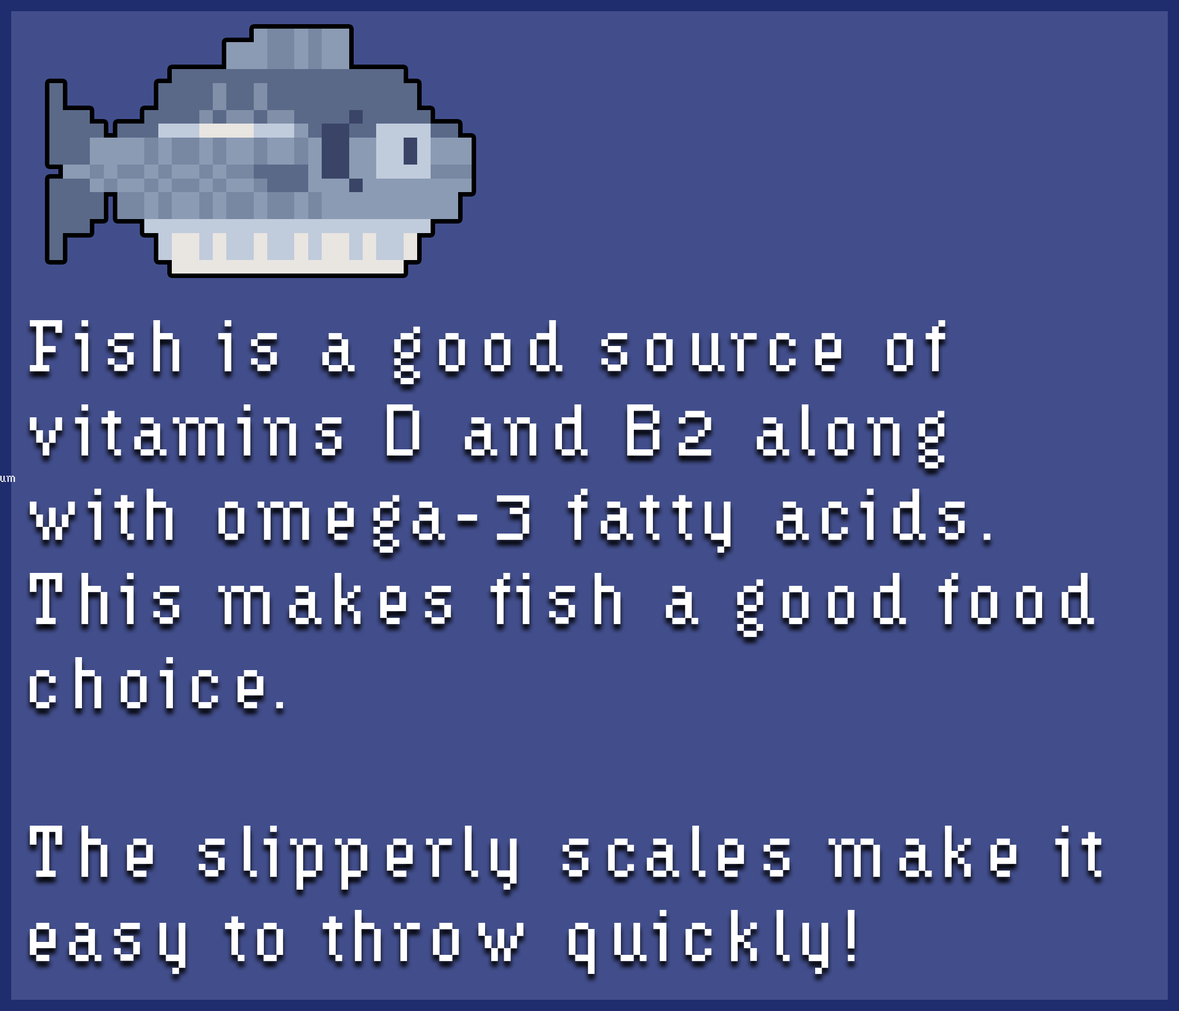
<style>
.page{position:relative;width:1179px;height:1011px;background:#424e8c}
.page>*{position:absolute;margin:0}
.t1{font:70.2px "HydrophiliaIced";letter-spacing:0.1em;color:#ffffff}
</style>
<div class="page">
<p class="t1" style="left:30px;top:320px;width:1072px;height:654px">Fish is a good source of <br>vitamins D and B2 along<br>with omega-3 fatty acids.<br>This makes fish a good food<br>choice.<br><br>The slipperly scales make it<br>easy to throw quickly!</p>
</div>
